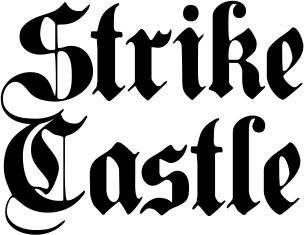
<style>
.page{position:relative;width:304px;height:235px;background:#ffffff}
.page>*{position:absolute;margin:0}
.t1{font:121px/115px "PlainGermanica";color:#000000}
</style>
<div class="page">
<p class="t1" style="left:0px;top:0px;width:304px;height:235px;text-align:center">Strike<br>Castle</p>
</div>
